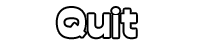
<style>
.page{position:relative;width:200px;height:52px;background:#ffffff}
.page>*{position:absolute;margin:0}
.t1{font:40px "Glockenspiel";color:#ffffff}
</style>
<div class="page">
<p class="t1" style="left:57px;top:8px;width:79px;height:30px">Quit</p>
</div>
